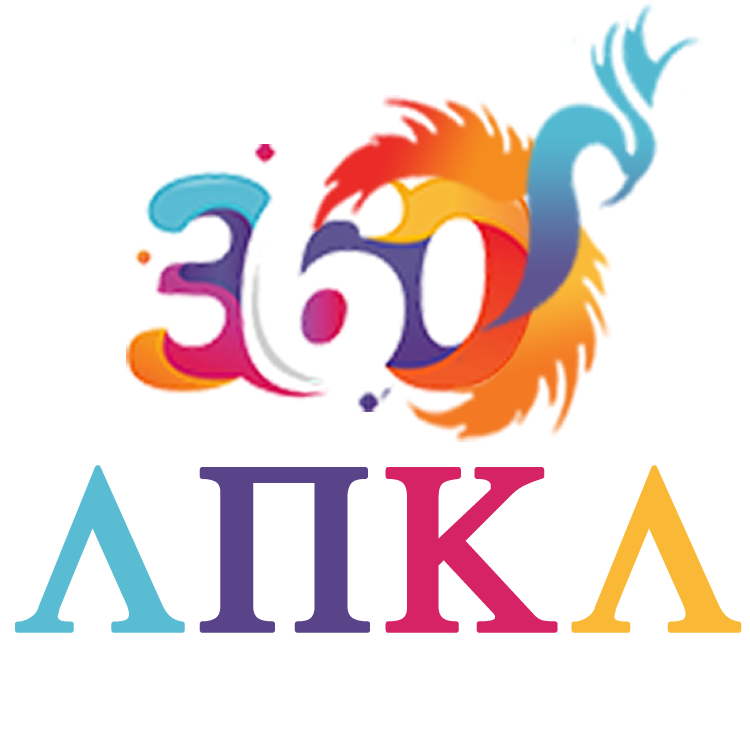
<style>
.page{position:relative;width:750px;height:750px;background:#ffffff}
.page>*{position:absolute;margin:0}
.t1{font:267px "AchillesBold";color:#59bcd3}
.t2{font:267px "AchillesBold";color:#594489}
.t3{font:267px "AchillesBold";color:#d62365}
.t4{font:267px "AchillesBold";color:#f9b937}
</style>
<div class="page">
<p class="t1" style="left:15px;top:465px;width:727px;height:168px">A<span class="t2">N</span><span class="t3">K</span><span class="t4">A</span></p>
</div>
